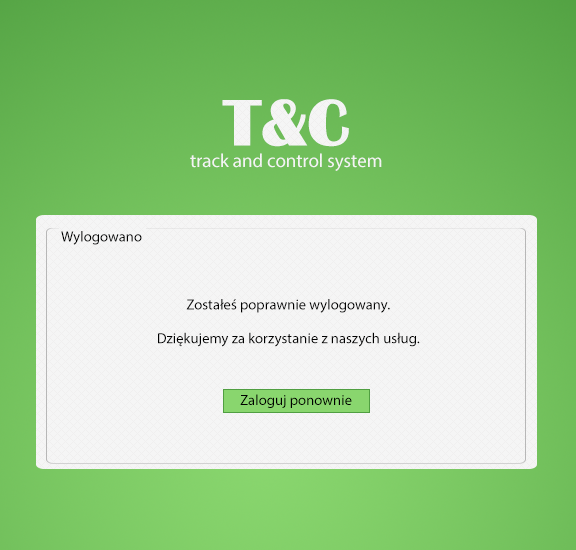
<style>
.page{position:relative;width:576px;height:550px;background:#f5f5f5}
.page>*{position:absolute;margin:0}
.t1{font:18.9px "MyriadPro-Regular";color:#f5f5f5}
.t2{font:63px "Bastion";color:#f5f5f5}
.t3{font:14.7px "MyriadPro-Regular";color:#000000}
</style>
<div class="page">
<p class="t1" style="left:190px;top:99px;width:192px;height:72px;text-align:center"><span class="t2">T&amp;C<br></span>track and control system</p>
<p class="t3" style="left:61px;top:231px;width:81px;height:14px">Wylogowano</p>
<p class="t3" style="left:158px;top:299px;width:262px;height:48px;text-align:center">Zostałeś poprawnie wylogowany.<br><br>Dziękujemy za korzystanie z naszych usług.</p>
<p class="t3" style="left:240px;top:394px;width:112px;height:14px">Zaloguj ponownie</p>
</div>
